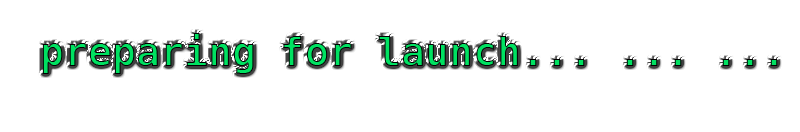
<style>
.page{position:relative;width:800px;height:132px;background:#ffffff}
.page>*{position:absolute;margin:0}
.t1{font:40px "Menlo-Bold"}
</style>
<div class="page">
<p class="t1" style="left:42px;top:33px;width:736px;height:41px">preparing for launch... ... ...</p>
</div>
